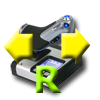
<style>
.page{position:relative;width:100px;height:100px;background:#ffffff}
.page>*{position:absolute;margin:0}
.t1{font:37.5px "Tahoma-Bold"}
</style>
<div class="page">
<p class="t1" style="left:36px;top:65px;width:26px;height:28px">R</p>
</div>
